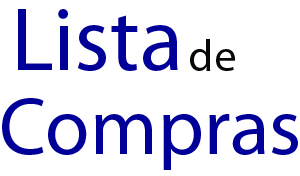
<style>
.page{position:relative;width:300px;height:176px;background:#ffffff}
.page>*{position:absolute;margin:0}
.t1{font:90.1px "MyriadPro-Regular";color:#000099}
.t2{font:45.1px "MyriadPro-Regular";color:#0a0707}
.t3{font:81.1px "MyriadPro-Regular";color:#000099}
</style>
<div class="page">
<p class="t1" style="left:18px;top:9px;width:160px;height:62px">Lista</p>
<p class="t2" style="left:190px;top:39px;width:45px;height:32px">de</p>
<p class="t3" style="left:2px;top:98px;width:296px;height:72px">Compras</p>
</div>
